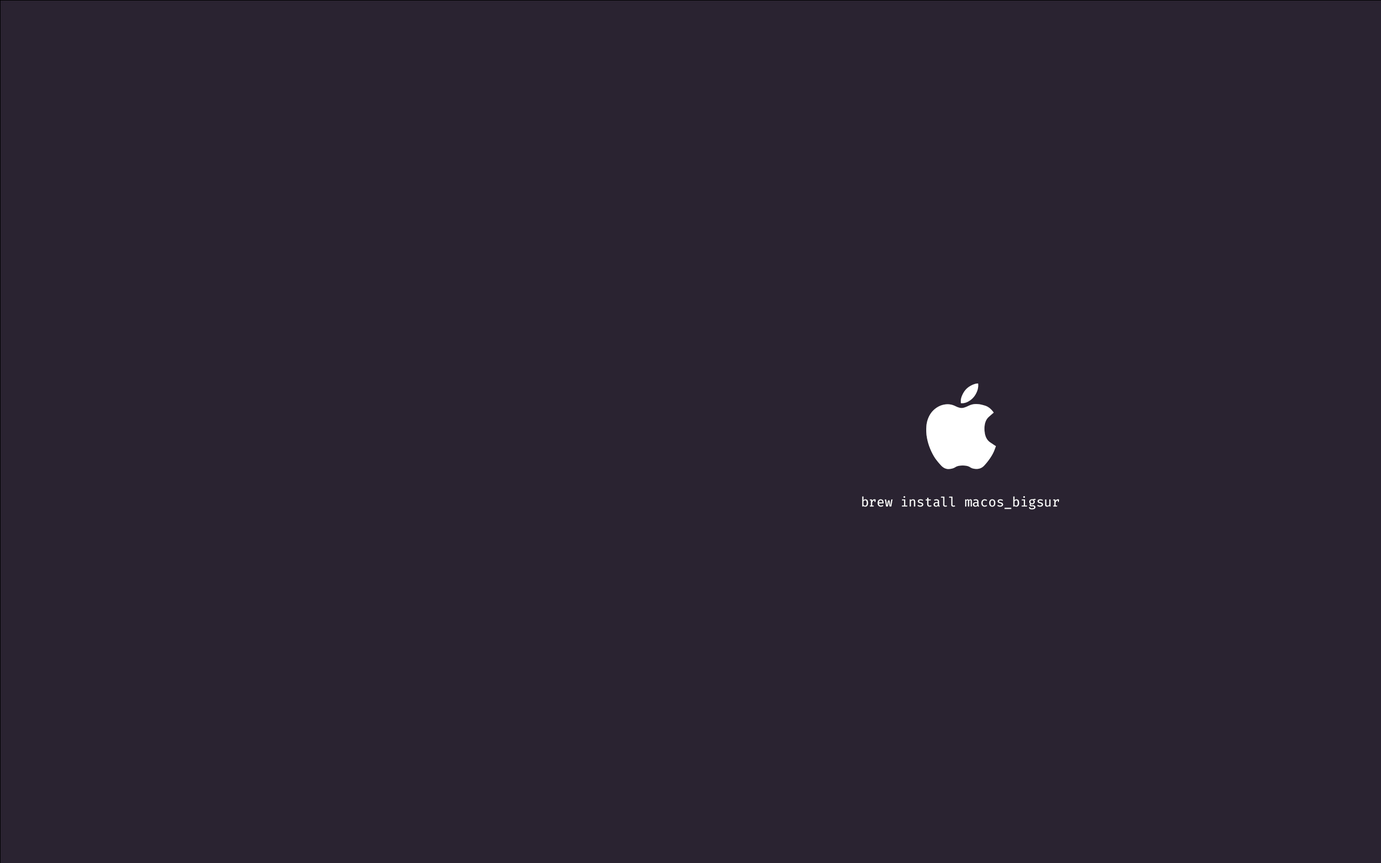
<style>
.page{position:relative;width:1381px;height:863px;background:#2a2331}
.page>*{position:absolute;margin:0}
.t1{font:12.9px "FiraCodeNerdFontCompleteM-Regular";color:#ffffff}
</style>
<div class="page">
<p class="t1" style="left:862px;top:496px;width:198px;height:14px">brew install macos_bigsur</p>
</div>
